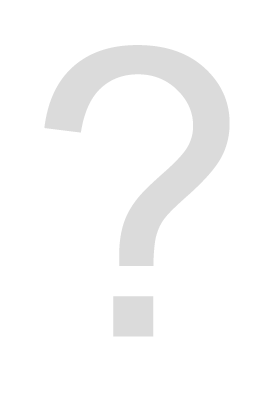
<style>
.page{position:relative;width:270px;height:400px;background:#ffffff}
.page>*{position:absolute;margin:0}
.t1{font:400.1px "ArialMT";letter-spacing:-0.05em;color:#dbdbdb}
</style>
<div class="page">
<p class="t1" style="left:44px;top:45px;width:186px;height:292px">?</p>
</div>
